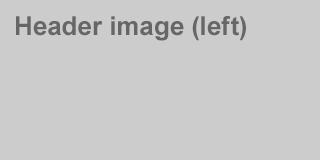
<style>
.page{position:relative;width:320px;height:160px;background:#cccccc}
.page>*{position:absolute;margin:0}
.t1{font:26px "Arial-BoldMT";color:#666666}
</style>
<div class="page">
<p class="t1" style="left:16px;top:16px;width:230px;height:25px">Header image (left)</p>
</div>
